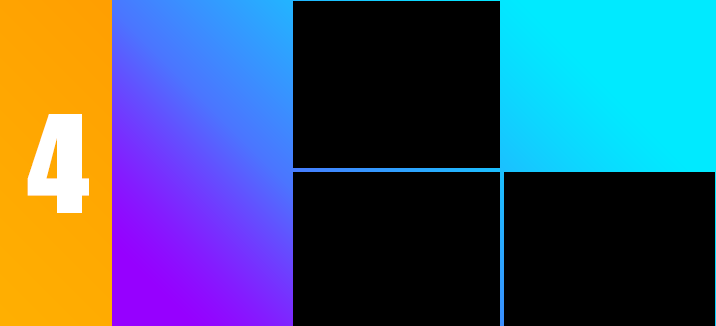
<style>
.page{position:relative;width:716px;height:326px;background:#000000}
.page>*{position:absolute;margin:0}
.t1{font:125px "Impact";color:#ffffff}
</style>
<div class="page">
<p class="t1" style="left:27px;top:114px;width:62px;height:99px">4</p>
</div>
